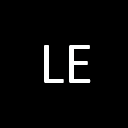
<style>
.page{position:relative;width:128px;height:128px;background:#000000}
.page>*{position:absolute;margin:0}
.t1{font:60px "Calibri";color:#feffff}
</style>
<div class="page">
<p class="t1" style="left:44px;top:45px;width:47px;height:38px">LE</p>
</div>
